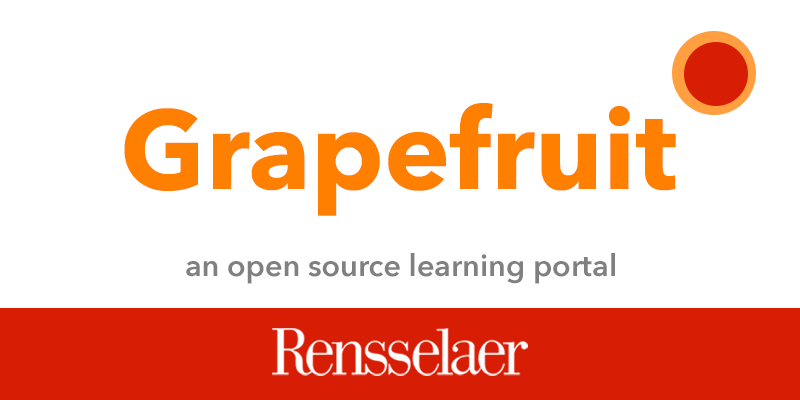
<style>
.page{position:relative;width:800px;height:400px;background:#ffffff}
.page>*{position:absolute;margin:0}
.t1{font:111.1px "AvenirNext-Bold";color:#ff7f00}
.t2{font:30.6px "AvenirNext-DemiBold";color:#818080}
</style>
<div class="page">
<p class="t1" style="left:124px;top:103px;width:552px;height:113px">Grapefruit</p>
<p class="t2" style="left:186px;top:253px;width:429px;height:31px">an open source learning portal</p>
</div>
